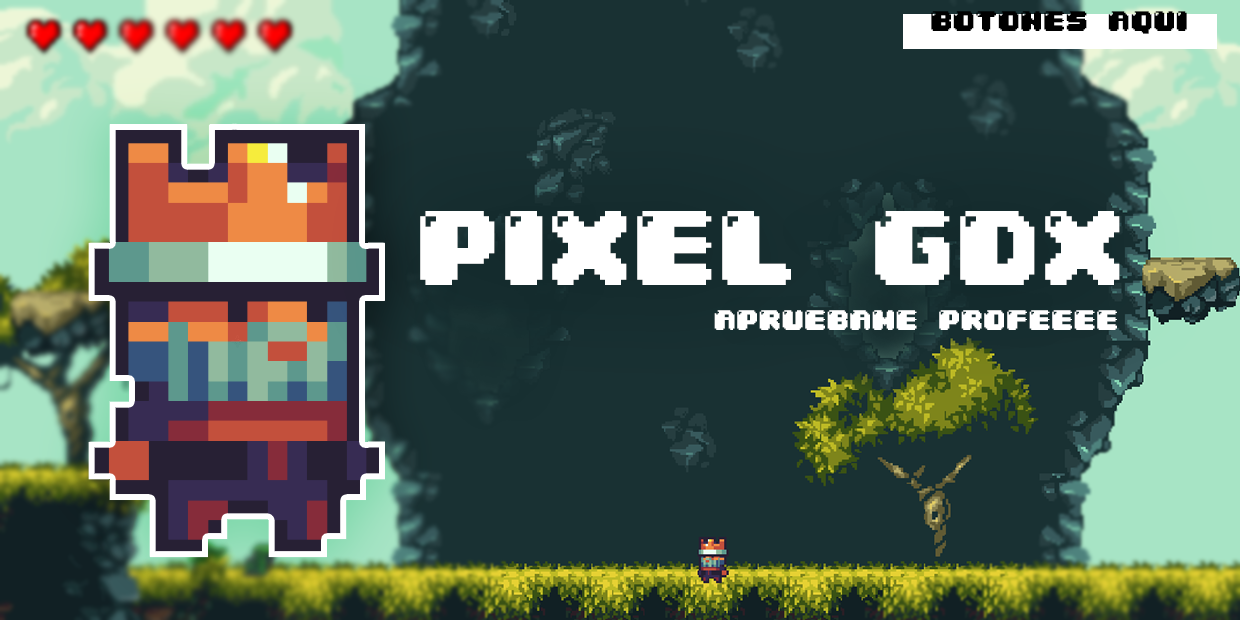
<style>
.page{position:relative;width:1240px;height:620px;background:#193133}
.page>*{position:absolute;margin:0}
.t1{font:24px "04b30";color:#000000}
.t2{font:90px "04b30";color:#ffffff}
.t3{font:24px "04b30";color:#ffffff}
</style>
<div class="page">
<p class="t1" style="left:931px;top:11px;width:256px;height:23px">BOTONES AQUI</p>
<p class="t2" style="left:420px;top:211px;width:700px;height:74px">PIXEL GDX</p>
<p class="t3" style="left:714px;top:310px;width:403px;height:20px">APRUEBAME PROFEEEE</p>
</div>
